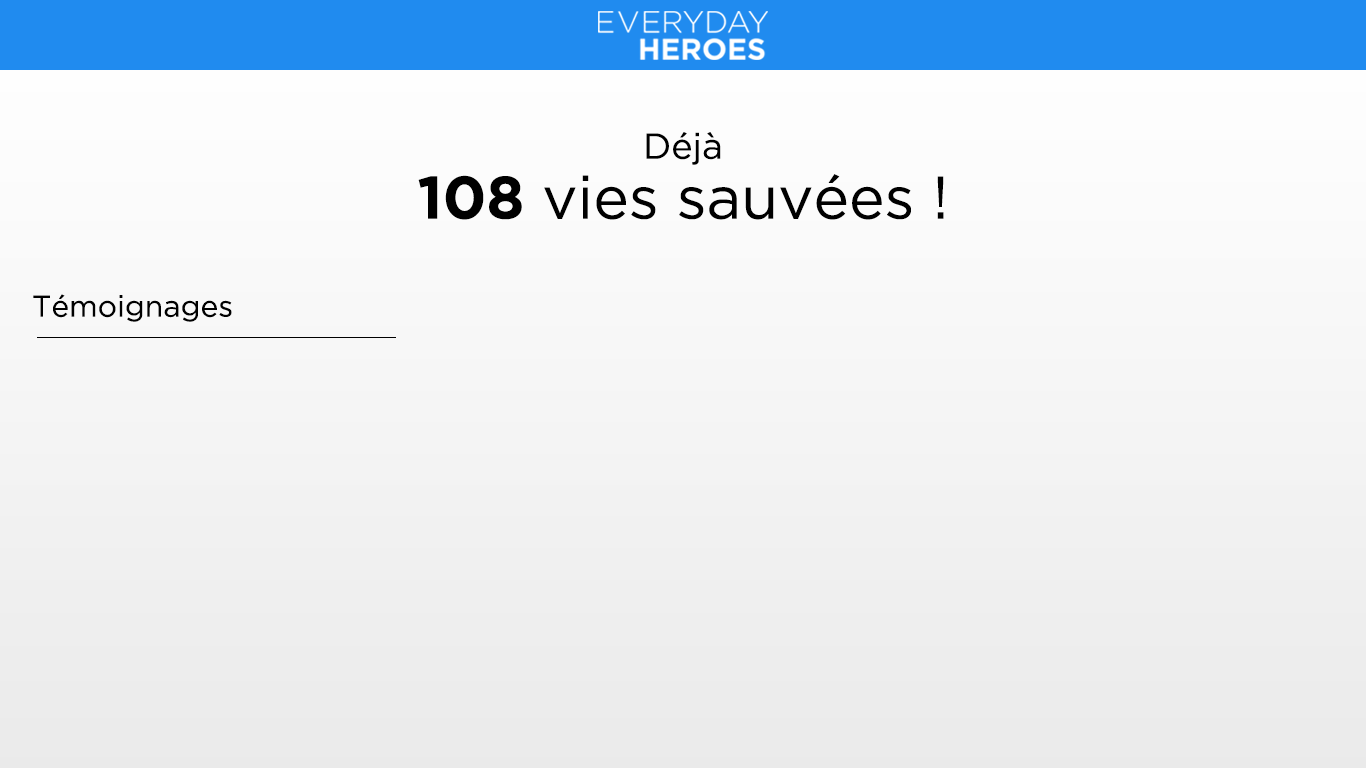
<style>
.page{position:relative;width:1366px;height:768px}
.page>*{position:absolute;margin:0}
.t1{font:36px "Gotham-Book";color:#000000}
.t2{font:60px "Gotham-Book";color:#000000}
.t3{font:60px "Gotham-Bold";color:#000000}
.t4{font:30px "Gotham-Book";color:#000000}
</style>
<div class="page">
<p class="t1" style="left:646px;top:132px;width:75px;height:33px">Déjà</p>
<p class="t2" style="left:418px;top:174px;width:526px;height:46px"><span class="t3">108</span> vies sauvées !</p>
<p class="t4" style="left:33px;top:294px;width:199px;height:28px">Témoignages</p>
</div>
